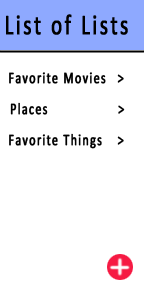
<style>
.page{position:relative;width:144px;height:288px;background:#ffffff}
.page>*{position:absolute;margin:0}
.t1{font:28.8px "Calibri";letter-spacing:0.1em;color:#000000;font-weight:bold;scale:0.72 1}
.t2{font:16.2px "Calibri";letter-spacing:0.1em;color:#000000;font-weight:bold;scale:0.72 1}
</style>
<div class="page">
<p class="t1" style="left:6px;top:14px;width:122px;height:21px">List of Lists</p>
<p class="t2" style="left:9px;top:72px;width:115px;height:12px">Favorite Movies &gt;</p>
<p class="t2" style="left:10px;top:102px;width:115px;height:13px">Places  &gt;</p>
<p class="t2" style="left:9px;top:133px;width:115px;height:16px">Favorite Things &gt;</p>
</div>
